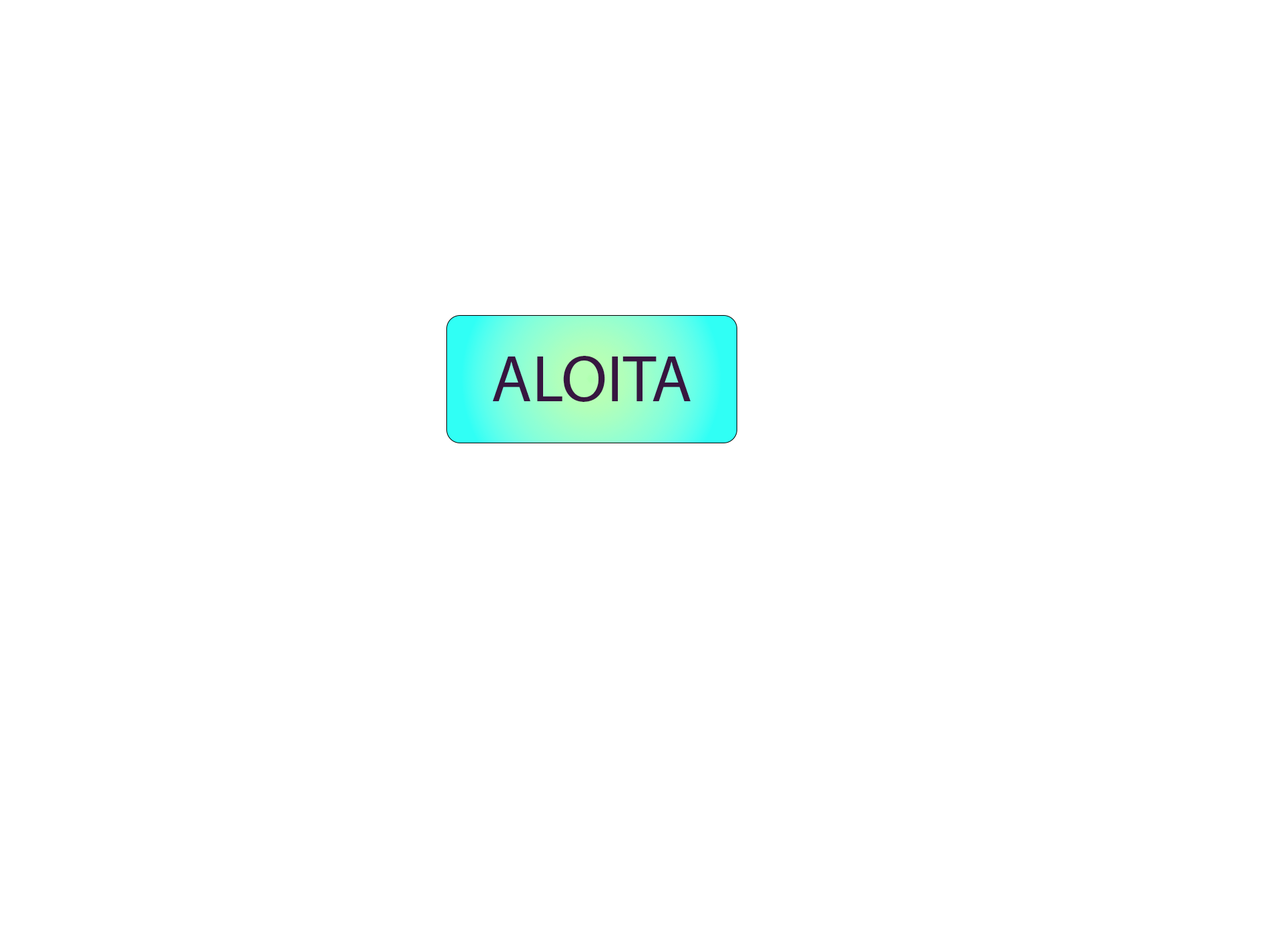
<style>
.page{position:relative;width:1261px;height:946px;background:#ffffff}
.page>*{position:absolute;margin:0}
.t1{font:66.7px "MyriadPro-Regular";color:#371640}
</style>
<div class="page">
<p class="t1" style="left:492px;top:356px;width:199px;height:46px">ALOITA</p>
</div>
